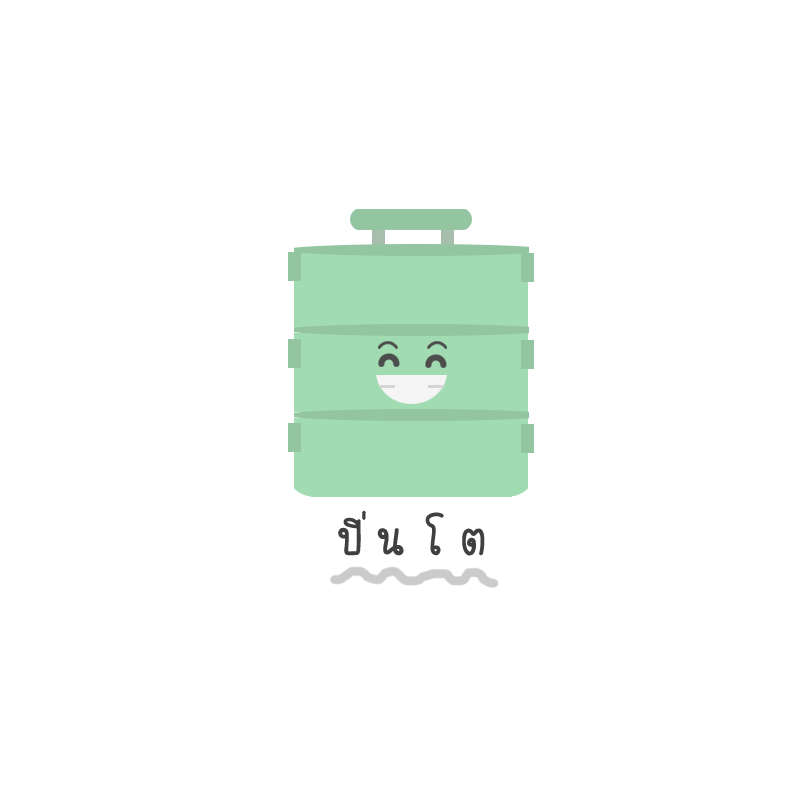
<style>
.page{position:relative;width:800px;height:800px;background:#ffffff}
.page>*{position:absolute;margin:0}
.t1{font:47.1px "SanamDeklenchaya";letter-spacing:0.09em;color:#404040;font-weight:bold}
.t2{font:47.1px "SanamDeklenchaya";letter-spacing:0.06em;color:#404040;font-weight:bold}
</style>
<div class="page">
<p class="t1" style="left:338px;top:510px;width:147px;height:46px">ปิ่น<span class="t2"> โ ต</span></p>
</div>
